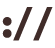
<style>
.page{position:relative;width:55px;height:48px;background:#ffffff}
.page>*{position:absolute;margin:0}
.t1{font:36px "FuturaLT-Bold";letter-spacing:-0.025em;color:#402c29}
</style>
<div class="page">
<p class="t1" style="left:2px;top:7px;width:51px;height:34px">://</p>
</div>
